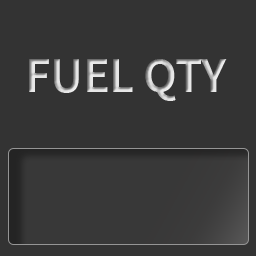
<style>
.page{position:relative;width:256px;height:256px;background:#333333}
.page>*{position:absolute;margin:0}
.t1{font:50px "SourceSansPro-SemiBold";letter-spacing:-0.01em}
</style>
<div class="page">
<p class="t1" style="left:29px;top:59px;width:198px;height:42px">FUEL QTY</p>
</div>
